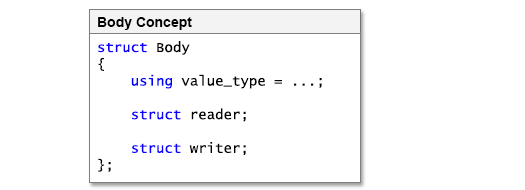
<style>
.page{position:relative;width:525px;height:190px;background:#ffffff}
.page>*{position:absolute;margin:0}
.t1{font:14px "Arial-BoldMT";color:#010101}
.t2{font:14px "LucidaConsole";color:#000000}
.t3{font:14px "LucidaConsole";color:#0c00ff}
.t4{font:14px "LucidaConsole";color:#0000ff}
</style>
<div class="page">
<p class="t1" style="left:98px;top:17px;width:94px;height:13px">Body Concept</p>
<p class="t2" style="left:98px;top:41px;width:224px;height:131px"><span class="t3">struct </span>Body<br>{<br>    <span class="t4">using</span> value_type = ...;<br><br>    <span class="t3">struct</span> reader;<br><br>    <span class="t3">struct</span> writer;<br>};</p>
</div>
